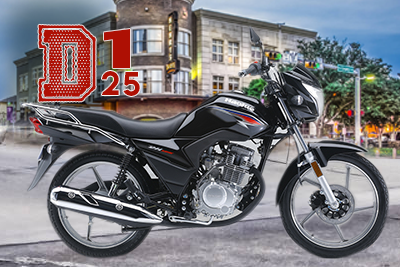
<style>
.page{position:relative;width:400px;height:267px}
.page>*{position:absolute;margin:0}
.t1{font:99.7px "FridayNightLights";color:#ae1004}
.t2{font:48.9px "LemonMilk";color:#ae1004;scale:2.23 1}
.t3{font:30px "LemonMilk";color:#ae1004}
</style>
<div class="page">
<p class="t1" style="left:38px;top:24px;width:58px;height:78px">D</p>
<p class="t2" style="left:104px;top:29px;width:26px;height:39px">1</p>
<p class="t3" style="left:101px;top:71px;width:18px;height:24px">2</p>
<p class="t3" style="left:123px;top:72px;width:17px;height:24px">5</p>
</div>
